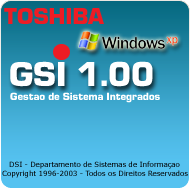
<style>
.page{position:relative;width:190px;height:189px}
.page>*{position:absolute;margin:0}
.t1{font:24px "Eurostile-Black";color:#ed1c24}
.t2{font:36px "Eurostile-Black";color:#ffffff}
.t3{font:11px "Eurostile-Black";color:#ffffff}
.t4{font:7px "Verdana"}
</style>
<div class="page">
<p class="t1" style="left:4px;top:8px;width:100px;height:16px">TOSHIBA</p>
<p class="t2" style="left:10px;top:61px;width:143px;height:26px">GSI 1.00</p>
<p class="t3" style="left:10px;top:92px;width:150px;height:11px">Gestao de Sistema Integrados</p>
<p class="t4" style="left:9px;top:161px;width:171px;height:8px">DSI - Departamento de Sistemas de Informaçao</p>
<p class="t4" style="left:2px;top:170px;width:186px;height:8px">Copyright 1996-2003 - Todos os Direitos Reservados</p>
</div>
